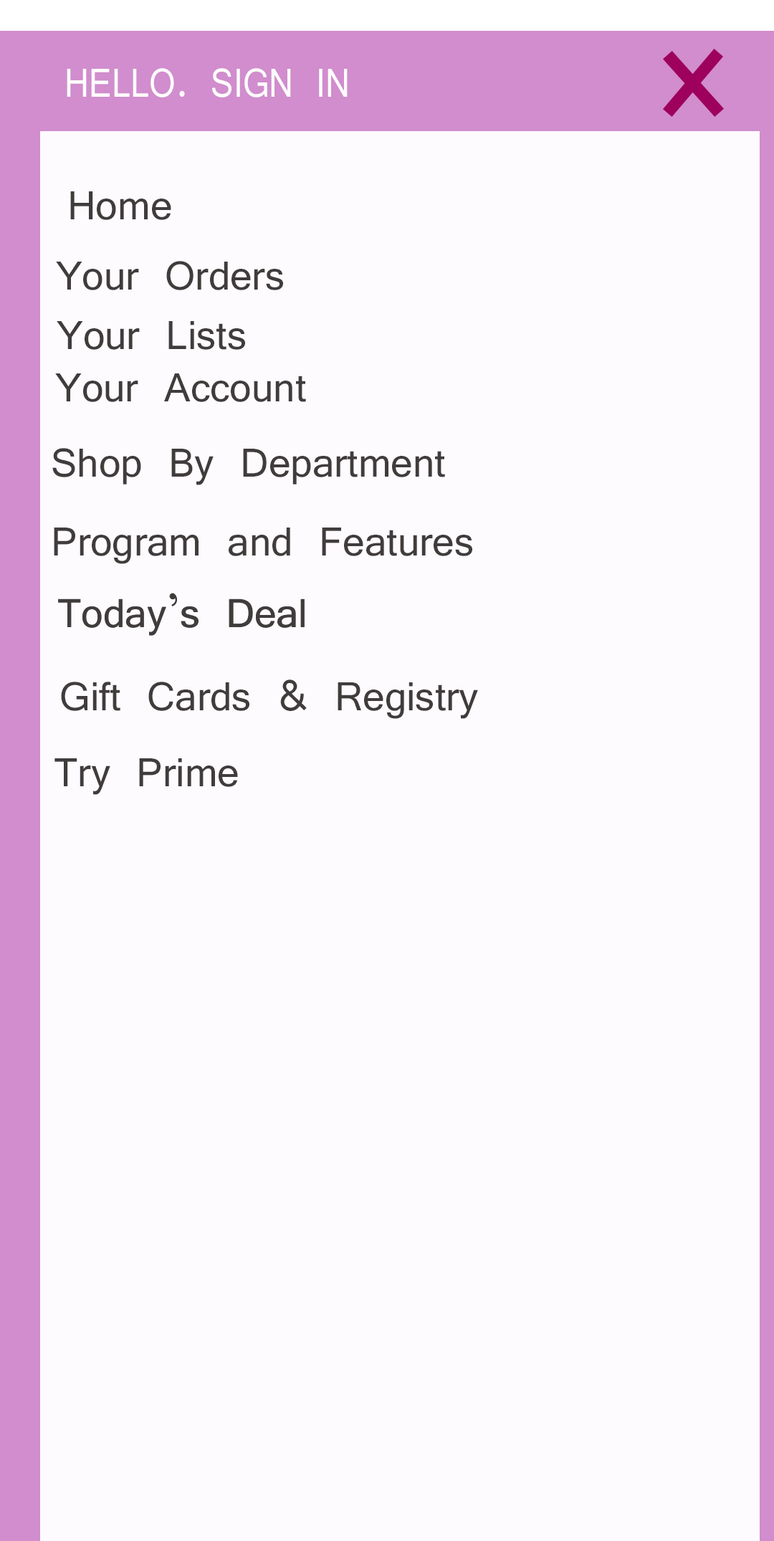
<style>
.page{position:relative;width:774px;height:1541px;background:#fefbfe}
.page>*{position:absolute;margin:0}
.t1{font:43.6px "Vrinda";color:#fdfcfc;scale:0.86 1}
.t2{font:43.6px "Vrinda";color:#413c3c}
.t3{font:43.7px "Vrinda";color:#413c3c}
</style>
<div class="page">
<p class="t1" style="left:67px;top:68px;width:281px;height:29px">HELLO. SIGN IN</p>
<p class="t2" style="left:70px;top:191px;width:101px;height:29px">Home</p>
<p class="t2" style="left:56px;top:261px;width:227px;height:29px">Your Orders</p>
<p class="t2" style="left:57px;top:321px;width:188px;height:29px">Your Lists</p>
<p class="t2" style="left:55px;top:373px;width:251px;height:29px">Your Account</p>
<p class="t2" style="left:52px;top:448px;width:393px;height:37px">Shop By Department</p>
<p class="t2" style="left:54px;top:527px;width:418px;height:37px">Program and Features</p>
<p class="t2" style="left:58px;top:593px;width:247px;height:43px">Today’s Deal</p>
<p class="t3" style="left:58px;top:593px;width:247px;height:43px">Today’s Deal</p>
<p class="t2" style="left:61px;top:679px;width:417px;height:40px">Gift Cards &amp; Registry</p>
<p class="t2" style="left:54px;top:758px;width:184px;height:37px">Try Prime</p>
</div>
